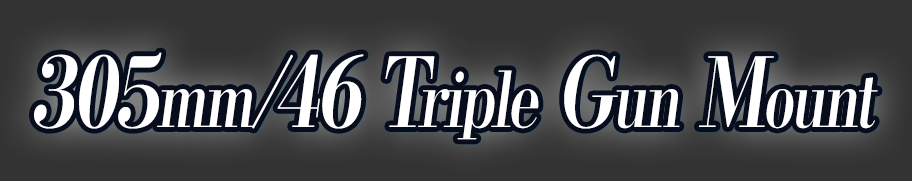
<style>
.page{position:relative;width:912px;height:181px;background:#333333}
.page>*{position:absolute;margin:0}
.t1{font:96px "KochoStd-Heavy";letter-spacing:-0.05em;color:#ffffff;font-style:italic;scale:0.75 1}
.t2{font:76.8px "KochoStd-Heavy";letter-spacing:-0.05em;color:#ffffff;font-style:italic;scale:0.75 1}
</style>
<div class="page">
<p class="t1" style="left:34px;top:52px;width:844px;height:88px">305<span class="t2">mm</span>/46 T<span class="t2">riple</span> G<span class="t2">un</span> M<span class="t2">ount</span></p>
</div>
